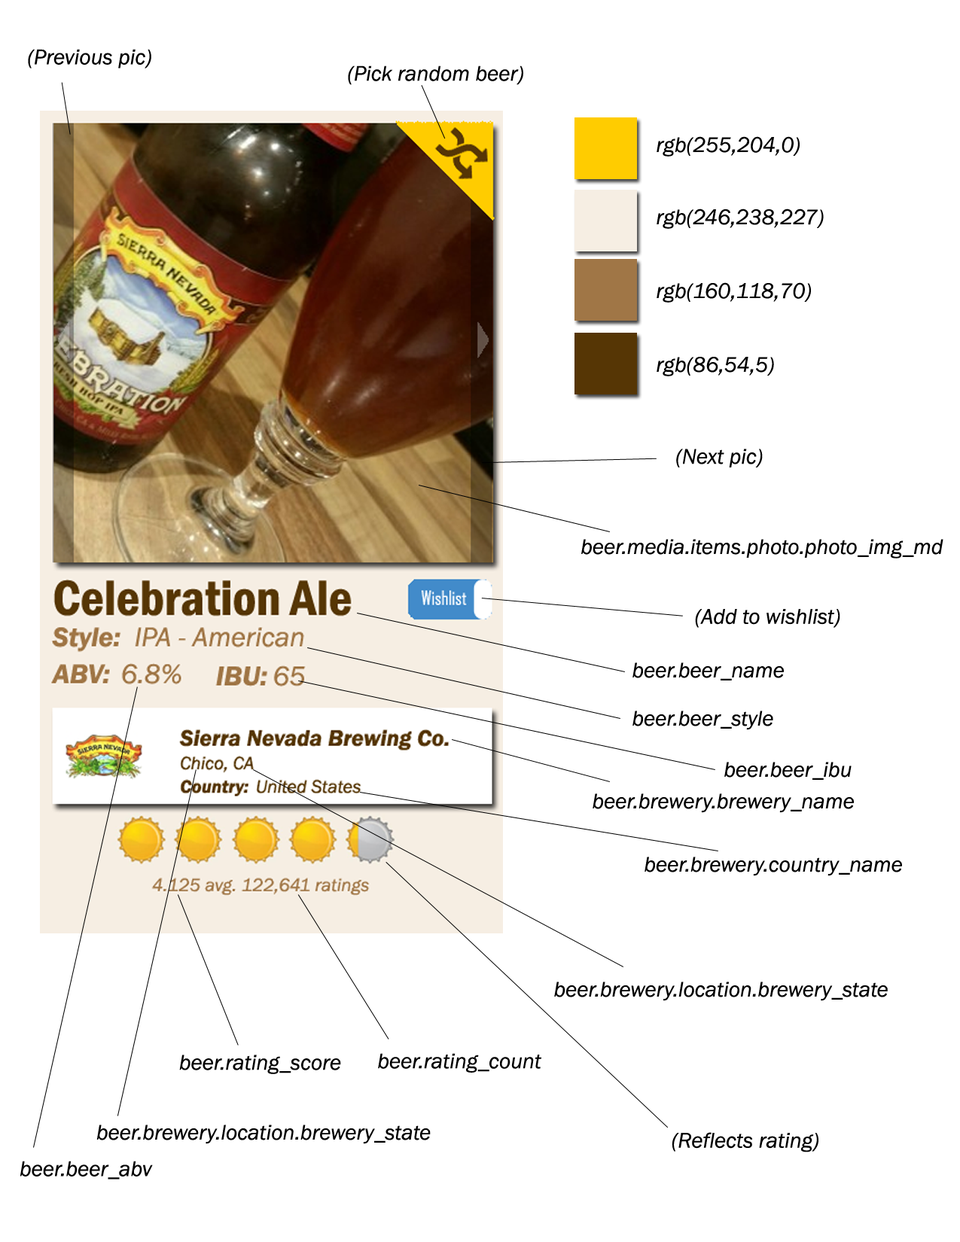
<style>
.page{position:relative;width:960px;height:1242px;background:#ffffff}
.page>*{position:absolute;margin:0}
.t1{font:22px "FranklinGothic-BookItalic";color:#000000}
</style>
<div class="page">
<p class="t1" style="left:28px;top:49px;width:123px;height:20px">(Previous pic)</p>
<p class="t1" style="left:348px;top:65px;width:175px;height:20px">(Pick random beer)</p>
<p class="t1" style="left:657px;top:136px;width:143px;height:21px">rgb(255,204,0)</p>
<p class="t1" style="left:657px;top:209px;width:167px;height:20px">rgb(246,238,227)</p>
<p class="t1" style="left:657px;top:282px;width:154px;height:21px">rgb(160,118,70)</p>
<p class="t1" style="left:657px;top:357px;width:117px;height:19px">rgb(86,54,5)</p>
<p class="t1" style="left:676px;top:449px;width:87px;height:19px">(Next pic)</p>
<p class="t1" style="left:581px;top:539px;width:362px;height:20px">beer.media.items.photo.photo_img_md</p>
<p class="t1" style="left:695px;top:609px;width:145px;height:19px">(Add to wishlist)</p>
<p class="t1" style="left:632px;top:663px;width:152px;height:18px">beer.beer_name</p>
<p class="t1" style="left:632px;top:711px;width:141px;height:19px">beer.beer_style</p>
<p class="t1" style="left:724px;top:762px;width:127px;height:18px">beer.beer_ibu</p>
<p class="t1" style="left:593px;top:794px;width:261px;height:19px">beer.brewery.brewery_name</p>
<p class="t1" style="left:644px;top:857px;width:258px;height:19px">beer.brewery.country_name</p>
<p class="t1" style="left:554px;top:982px;width:334px;height:19px">beer.brewery.location.brewery_state</p>
<p class="t1" style="left:179px;top:1055px;width:162px;height:19px">beer.rating_score</p>
<p class="t1" style="left:378px;top:1053px;width:163px;height:20px">beer.rating_count</p>
<p class="t1" style="left:96px;top:1125px;width:335px;height:19px">beer.brewery.location.brewery_state</p>
<p class="t1" style="left:672px;top:1132px;width:146px;height:21px">(Reflects rating)</p>
<p class="t1" style="left:20px;top:1161px;width:133px;height:19px">beer.beer_abv</p>
</div>
